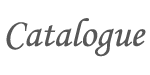
<style>
.page{position:relative;width:150px;height:75px;background:#ffffff}
.page>*{position:absolute;margin:0}
.t1{font:40px "MonotypeCorsiva";color:#575757}
</style>
<div class="page">
<p class="t1" style="left:6px;top:18px;width:140px;height:39px">Catalogue</p>
</div>
